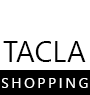
<style>
.page{position:relative;width:90px;height:95px;background:#ffffff}
.page>*{position:absolute;margin:0}
.t1{font:29px "NirmalaUI";color:#000000}
.t2{font:14px "NirmalaUI";letter-spacing:0.2em;color:#ffffff}
</style>
<div class="page">
<p class="t1" style="left:3px;top:41px;width:83px;height:21px">TACLA</p>
<p class="t2" style="left:2px;top:78px;width:86px;height:10px">SHOPPING</p>
</div>
